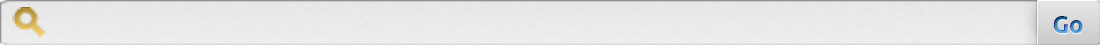
<style>
.page{position:relative;width:1100px;height:45px}
.page>*{position:absolute;margin:0}
.t1{font:24px "Ubuntu-Bold"}
</style>
<div class="page">
<p class="t1" style="left:1053px;top:16px;width:30px;height:18px">Go</p>
</div>
